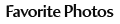
<style>
.page{position:relative;width:120px;height:24px;background:#ffffff}
.page>*{position:absolute;margin:0}
.t1{font:17.3px "AmiraParadiso";letter-spacing:-0.04em;color:#000000}
</style>
<div class="page">
<p class="t1" style="left:6px;top:4px;width:108px;height:13px;opacity:0.96">Favorite Photos</p>
</div>
